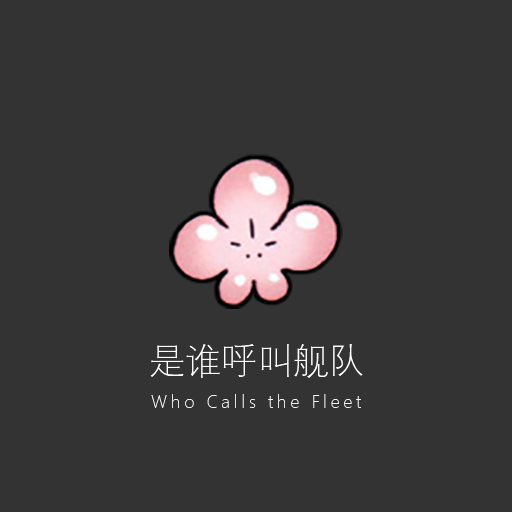
<style>
.page{position:relative;width:512px;height:512px;background:#333333}
.page>*{position:absolute;margin:0}
.t1{font:36px "DengXian-Light";color:#ffffff}
.t2{font:18px "SegoeUI-Light";letter-spacing:0.2em;color:#ffffff}
</style>
<div class="page">
<p class="t1" style="left:150px;top:344px;width:213px;height:34px">是谁呼叫舰队</p>
<p class="t2" style="left:151px;top:394px;width:210px;height:14px">Who Calls the Fleet</p>
</div>
